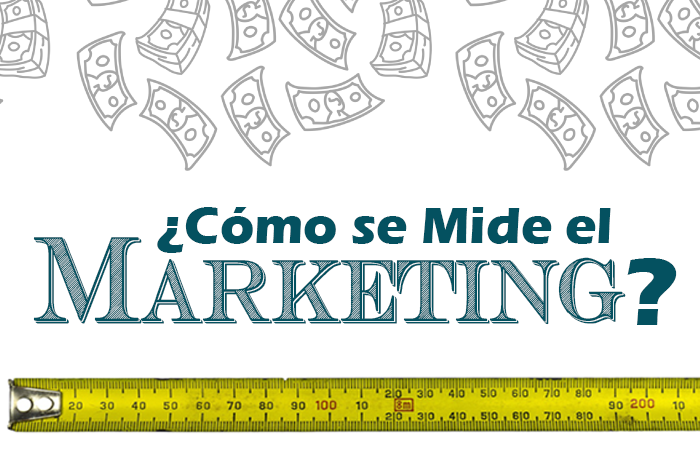
<style>
.page{position:relative;width:700px;height:450px;background:#ffffff}
.page>*{position:absolute;margin:0}
.t1{font:52.9px "ErasITC-Bold";color:#045160}
.t2{font:86.9px "CashCurrency";color:#045160}
.t3{font:98.6px "ErasITC-Bold";color:#045160}
</style>
<div class="page">
<p class="t1" style="left:157px;top:207px;width:454px;height:46px">¿Cómo se Mide el</p>
<p class="t2" style="left:33px;top:237px;width:593px;height:88px">Marketing</p>
<p class="t3" style="left:627px;top:258px;width:50px;height:67px">?</p>
</div>
